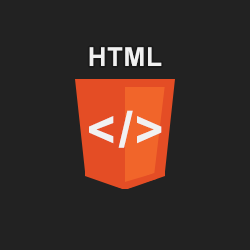
<style>
.page{position:relative;width:250px;height:250px;background:#222222}
.page>*{position:absolute;margin:0}
.t1{font:26px "Arial-BoldMT";letter-spacing:0.025em;color:#f1f1f1;font-variant:small-caps}
.t2{font:50px "Arial-BoldMT";letter-spacing:0.05em;color:#f1f1f1;font-variant:small-caps}
</style>
<div class="page">
<p class="t1" style="left:89px;top:47px;width:73px;height:19px">HTML</p>
<p class="t2" style="left:89px;top:110px;width:73px;height:38px">&lt;/&gt;</p>
</div>
